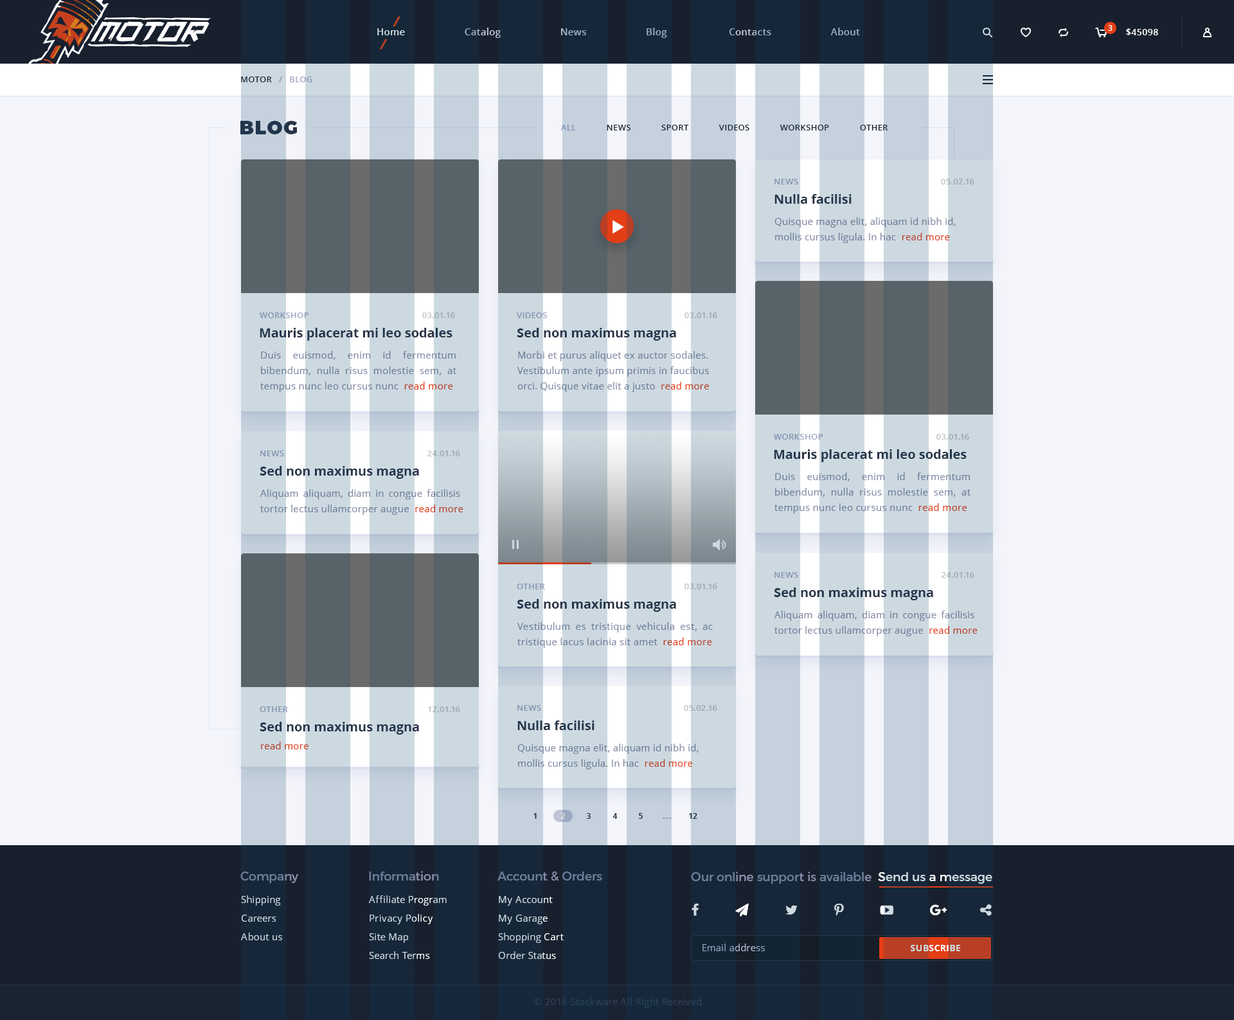
<style>
.page{position:relative;width:1234px;height:1020px;background:#f4f5fb}
.page>*{position:absolute;margin:0}
.t1{font:9.6px "OpenSans-Semibold";letter-spacing:0.02em}
.t2{font:7.7px "OpenSans-Bold";color:#ffffff}
.t3{font:9px "OpenSans-Semibold";letter-spacing:0.02em;color:#ffffff;text-transform:uppercase}
.t4{font:8.4px "OpenSans-Semibold";letter-spacing:0.02em;color:#a0a6c5;text-transform:uppercase}
.t5{font:8.4px "OpenSans-Semibold";letter-spacing:0.02em;color:#18202e;text-transform:uppercase}
.t6{font:19.3px "Montserrat-Black";letter-spacing:0.06em;color:#283346;text-transform:uppercase}
.t7{font:8.4px "OpenSans-Semibold";letter-spacing:0.02em;color:#8192b1;text-transform:uppercase}
.t8{font:8.4px "OpenSans-Semibold";letter-spacing:0.02em;color:#9ca8b1;text-transform:uppercase}
.t9{font:12.9px "OpenSans-Bold";color:#283346}
.t10{font:9.6px/15.4px "OpenSans";letter-spacing:0.02em}
.t11{font:8.4px "OpenSans-Semibold";letter-spacing:0.02em;text-transform:uppercase}
.t12{font:9.6px "OpenSans";letter-spacing:0.02em}
.t13{font:7.7px "OpenSans-Bold";letter-spacing:0.02em;color:#283346;text-transform:uppercase}
.t14{font:7.7px "OpenSans-Bold";letter-spacing:0.02em;color:#cdd9e0;text-transform:uppercase}
.t15{font:7.7px "OpenSans-Bold";letter-spacing:0.1em;color:#6d7d99;text-transform:uppercase}
.t16{font:12.2px "Montserrat-Regular";color:#6d7d99}
.t17{font:12.2px "Montserrat-Regular"}
.t18{font:9.6px/18.6px "OpenSans";letter-spacing:0.02em;color:#cdd9e0}
.t19{font:9px "OpenSans-Bold";letter-spacing:0.02em}
.t20{font:9.6px "OpenSans";letter-spacing:0.02em;color:#324057}
</style>
<div class="page">
<p class="t1" style="left:377px;top:28px;width:483px;height:10px">Home                      Catalog                      News                      Blog                       Contacts                      About</p>
<p class="t2" style="left:1108px;top:25px;width:5px;height:6px">3</p>
<p class="t3" style="left:1126px;top:28px;width:32px;height:7px">$45098</p>
<p class="t4" style="left:241px;top:76px;width:71px;height:6px"><span class="t5">Motor</span>   /   Blog</p>
<p class="t6" style="left:240px;top:121px;width:58px;height:13px">blog</p>
<p class="t5" style="left:561px;top:125px;width:327px;height:5px"><span class="t4">All             </span>News             Sport             Videos             Workshop             Other</p>
<p class="t7" style="left:775px;top:179px;width:23px;height:5px">News</p>
<p class="t8" style="left:941px;top:179px;width:34px;height:5px">05.02.16</p>
<p class="t9" style="left:775px;top:194px;width:77px;height:10px">Nulla facilisi</p>
<p class="t10" style="left:775px;top:217px;width:181px;height:26px;text-align:justify">Quisque magna elit, aliquam id nibh id, <br>mollis cursus ligula. In hac  read more</p>
<p class="t11" style="left:260px;top:312px;width:49px;height:6px">Workshop</p>
<p class="t8" style="left:422px;top:312px;width:33px;height:6px">03.01.16</p>
<p class="t7" style="left:517px;top:312px;width:30px;height:6px">videos</p>
<p class="t8" style="left:685px;top:312px;width:32px;height:6px">03.01.16</p>
<p class="t9" style="left:260px;top:328px;width:193px;height:13px">Mauris placerat mi leo sodales</p>
<p class="t9" style="left:517px;top:328px;width:159px;height:13px">Sed non maximus magna</p>
<p class="t10" style="left:260px;top:351px;width:196px;height:41px;text-align:justify">Duis euismod, enim id fermentum bibendum, nulla risus molestie sem, at tempus nunc leo cursus nunc  read more</p>
<p class="t10" style="left:518px;top:351px;width:191px;height:41px;text-align:justify">Morbi et purus aliquet ex auctor sodales. <br>Vestibulum ante ipsum primis in faucibus <br>orci. Quisque vitae elit a justo  read more</p>
<p class="t11" style="left:774px;top:434px;width:49px;height:6px">Workshop</p>
<p class="t8" style="left:937px;top:434px;width:32px;height:6px">03.01.16</p>
<p class="t9" style="left:774px;top:449px;width:193px;height:13px">Mauris placerat mi leo sodales</p>
<p class="t7" style="left:260px;top:451px;width:24px;height:5px">News</p>
<p class="t8" style="left:427px;top:451px;width:33px;height:5px">24.01.16</p>
<p class="t9" style="left:260px;top:466px;width:159px;height:13px">Sed non maximus magna</p>
<p class="t10" style="left:775px;top:473px;width:196px;height:41px;text-align:justify">Duis euismod, enim id fermentum bibendum, nulla risus molestie sem, at tempus nunc leo cursus nunc  read more</p>
<p class="t10" style="left:260px;top:489px;width:204px;height:26px;text-align:justify">Aliquam aliquam, diam in congue facilisis tortor lectus ullamcorper augue  read more</p>
<p class="t7" style="left:775px;top:572px;width:23px;height:6px">News</p>
<p class="t8" style="left:941px;top:572px;width:34px;height:6px">24.01.16</p>
<p class="t7" style="left:517px;top:584px;width:28px;height:6px">Other</p>
<p class="t8" style="left:685px;top:584px;width:32px;height:6px">03.01.16</p>
<p class="t9" style="left:774px;top:588px;width:159px;height:12px">Sed non maximus magna</p>
<p class="t9" style="left:517px;top:599px;width:159px;height:13px">Sed non maximus magna</p>
<p class="t10" style="left:775px;top:611px;width:203px;height:25px;text-align:justify">Aliquam aliquam, diam in congue facilisis tortor lectus ullamcorper augue  read more</p>
<p class="t10" style="left:518px;top:622px;width:195px;height:26px;text-align:justify">Vestibulum es tristique vehicula est, ac tristique lacus lacinia sit amet  read more</p>
<p class="t7" style="left:260px;top:706px;width:28px;height:6px">Other</p>
<p class="t8" style="left:428px;top:706px;width:32px;height:6px">12.01.16</p>
<p class="t7" style="left:518px;top:705px;width:23px;height:6px">News</p>
<p class="t8" style="left:684px;top:705px;width:33px;height:6px">05.02.16</p>
<p class="t9" style="left:260px;top:722px;width:159px;height:13px">Sed non maximus magna</p>
<p class="t9" style="left:518px;top:721px;width:77px;height:9px">Nulla facilisi</p>
<p class="t12" style="left:261px;top:742px;width:48px;height:8px">read more</p>
<p class="t10" style="left:518px;top:744px;width:181px;height:26px;text-align:justify">Quisque magna elit, aliquam id nibh id, <br>mollis cursus ligula. In hac  read more</p>
<p class="t13" style="left:534px;top:813px;width:3px;height:6px">1</p>
<p class="t14" style="left:561px;top:813px;width:5px;height:6px">2</p>
<p class="t13" style="left:587px;top:813px;width:4px;height:6px">3</p>
<p class="t13" style="left:613px;top:813px;width:5px;height:6px">4</p>
<p class="t13" style="left:639px;top:813px;width:4px;height:6px">5</p>
<p class="t15" style="left:663px;top:818px;width:8px;height:1px">...</p>
<p class="t13" style="left:689px;top:813px;width:9px;height:6px">12</p>
<p class="t16" style="left:240px;top:872px;width:58px;height:11px">Company</p>
<p class="t16" style="left:369px;top:871px;width:70px;height:10px">Information</p>
<p class="t16" style="left:498px;top:872px;width:104px;height:9px">Account &amp; Orders</p>
<p class="t17" style="left:691px;top:872px;width:302px;height:12px">Our online support is available  Send us a message</p>
<p class="t18" style="left:241px;top:896px;width:41px;height:45px">Shipping<br>Careers<br>About us</p>
<p class="t18" style="left:369px;top:896px;width:78px;height:63px">Affiliate Program<br>Privacy Policy<br>Site Map<br>Search Terms</p>
<p class="t18" style="left:498px;top:896px;width:66px;height:63px">My Account<br>My Garage<br>Shopping Cart<br>Order Status</p>
<p class="t12" style="left:703px;top:944px;width:62px;height:7px">Email address</p>
<p class="t19" style="left:911px;top:945px;width:49px;height:6px">SUBSCRIBE</p>
<p class="t20" style="left:534px;top:998px;width:168px;height:10px">© 2016 Stockware All Right Received</p>
</div>
